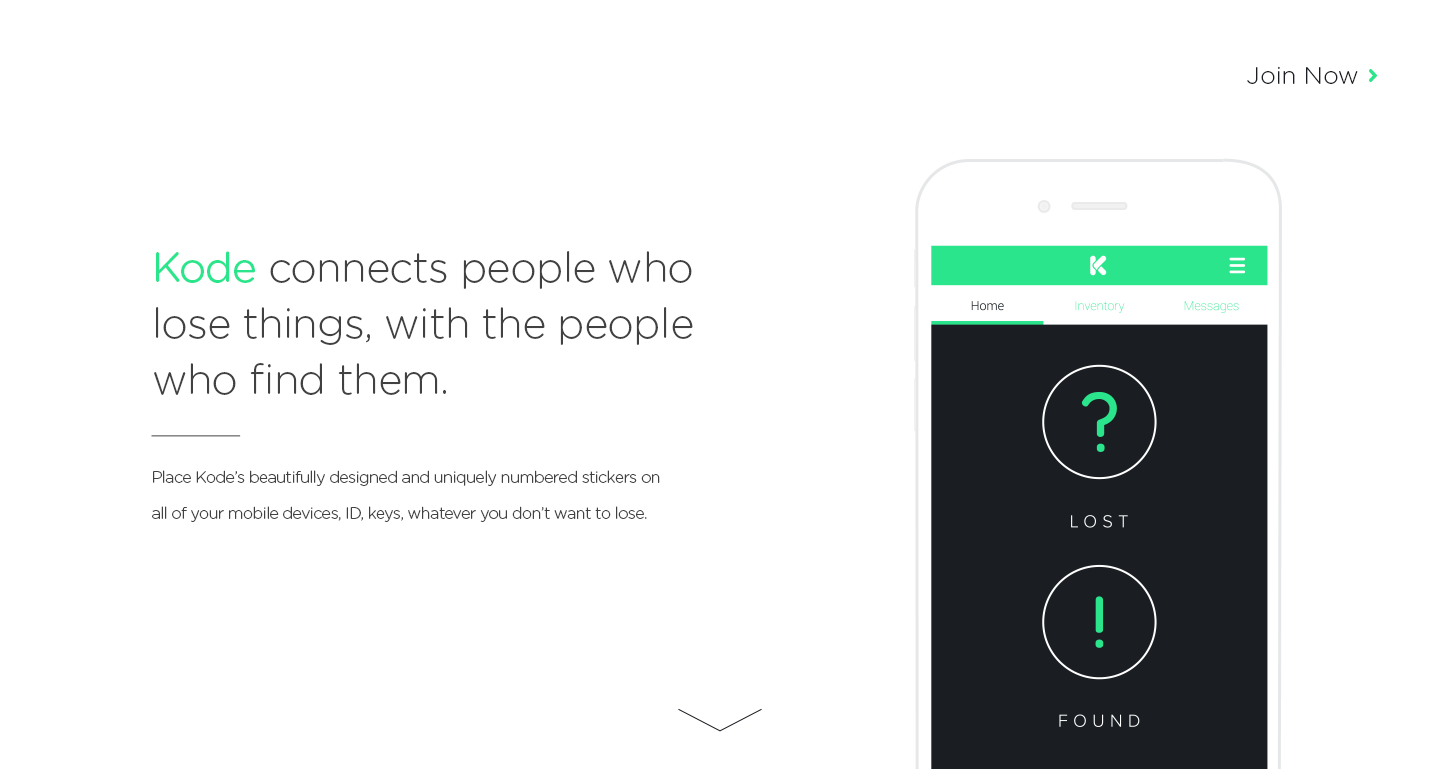
<style>
.page{position:relative;width:1440px;height:769px;background:#ffffff}
.page>*{position:absolute;margin:0}
.t1{font:24.4px "GothamRounded-Light";color:#1a1e23}
.t2{font:24.4px "Junegull-Regular";color:#2ae58b}
.t3{font:41.8px/55.7px "GothamRounded-Light";letter-spacing:-0.02em;color:#414141}
.t4{font:41.8px/55.7px "GothamRounded-Book";letter-spacing:-0.02em;color:#2ae58b}
.t5{font:16.2px/36.3px "GothamRounded-Light";letter-spacing:-0.04em;color:#414141}
</style>
<div class="page">
<p class="t1" style="left:1247px;top:66px;width:130px;height:18px">Join Now <span class="t2">&gt;</span></p>
<p class="t3" style="left:154px;top:251px;width:539px;height:144px"><span class="t4">Kode </span>connects people who <br>lose things, with the people <br>who find them.</p>
<p class="t5" style="left:152px;top:470px;width:508px;height:52px">Place Kode’s beautifully designed and uniquely numbered stickers on all of your mobile devices, ID, keys, whatever you don’t want to lose.</p>
</div>
